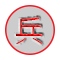
<style>
.page{position:relative;width:60px;height:60px;background:#ffffff}
.page>*{position:absolute;margin:0}
.t1{font:29.6px "MicrosoftJhengHeiRegular"}
</style>
<div class="page">
<p class="t1" style="left:16px;top:17px;width:27px;height:27px">兵</p>
</div>
